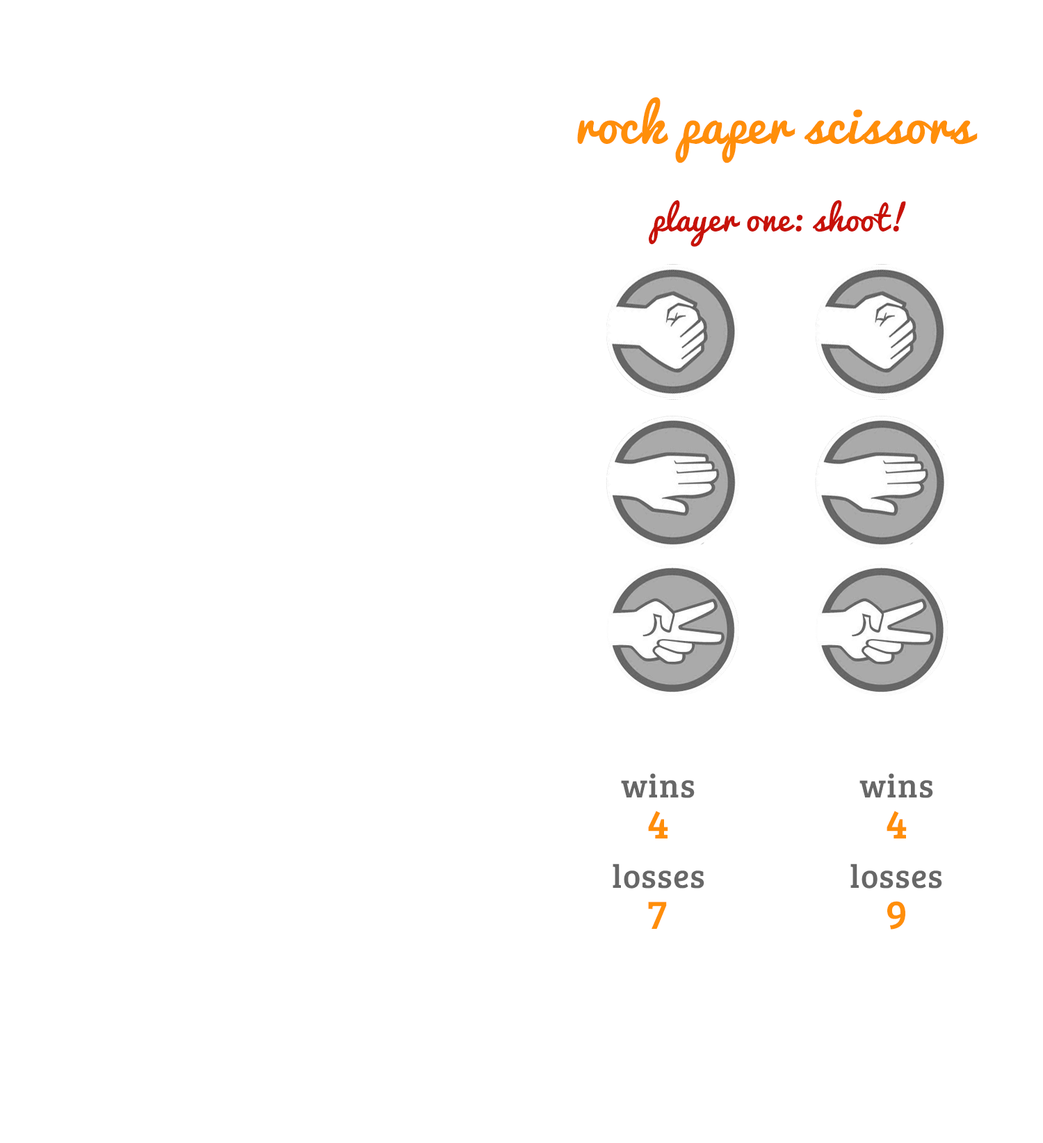
<style>
.page{position:relative;width:1043px;height:1143px;background:#ffffff}
.page>*{position:absolute;margin:0}
.t1{font:50.1px "Pacifico-Regular";letter-spacing:0.025em;color:#ff8e09}
.t2{font:33.4px "Pacifico-Regular";letter-spacing:0.025em;color:#c71209}
.t3{font:33.4px "BreeSerif-Regular";letter-spacing:0.025em;color:#676767}
.t4{font:41.7px "BreeSerif-Regular";letter-spacing:0.025em;color:#ff8e09}
</style>
<div class="page">
<p class="t1" style="left:577px;top:97px;width:401px;height:66px">rock paper scissors</p>
<p class="t2" style="left:649px;top:200px;width:257px;height:47px">player one: shoot!</p>
<p class="t3" style="left:621px;top:773px;width:74px;height:25px">wins</p>
<p class="t3" style="left:859px;top:773px;width:74px;height:25px">wins</p>
<p class="t4" style="left:648px;top:811px;width:20px;height:28px">4</p>
<p class="t4" style="left:887px;top:811px;width:20px;height:28px">4</p>
<p class="t3" style="left:613px;top:864px;width:91px;height:25px">losses</p>
<p class="t3" style="left:850px;top:864px;width:92px;height:25px">losses</p>
<p class="t4" style="left:648px;top:902px;width:19px;height:27px">7</p>
<p class="t4" style="left:887px;top:901px;width:18px;height:29px">9</p>
</div>
